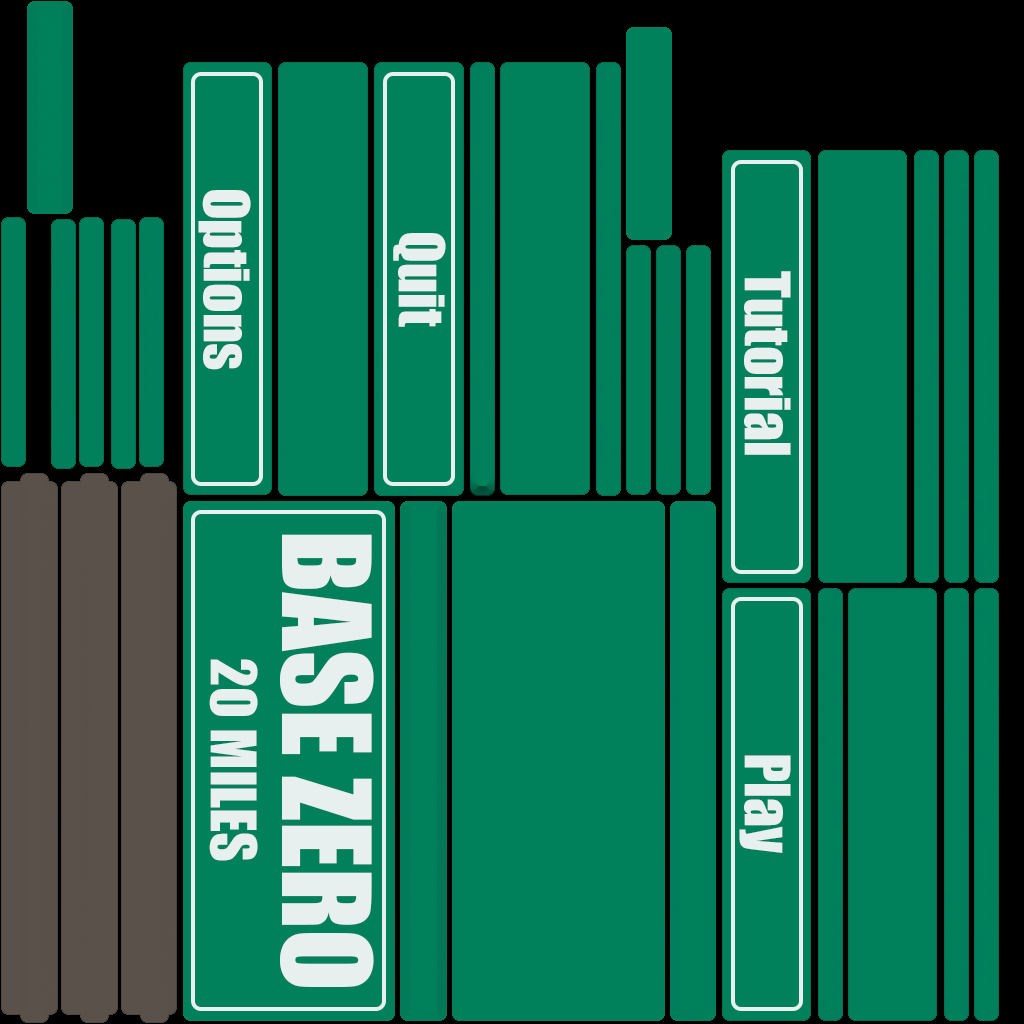
<style>
.page{position:relative;width:1024px;height:1024px;background:#01805c}
.page>*{position:absolute;margin:0}
.t1{font:57.9px "Impact";color:#e7f0ee}
.t2{font:113.4px "Impact";color:#e7f0ee}
</style>
<div class="page">
<p class="t1" style="left:198px;top:190px;width:53px;height:180px;rotate:90deg">Options</p>
<p class="t1" style="left:393px;top:233px;width:53px;height:94px;rotate:90deg">Quit</p>
<p class="t1" style="left:744px;top:271px;width:47px;height:184px;rotate:90deg">Tutorial</p>
<p class="t2" style="left:280px;top:534px;width:94px;height:453px;rotate:90deg">BASE ZERO</p>
<p class="t1" style="left:209px;top:659px;width:49px;height:202px;rotate:90deg">20 MILES</p>
<p class="t1" style="left:739px;top:755px;width:52px;height:98px;rotate:90deg">Play</p>
</div>
